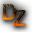
<style>
.page{position:relative;width:32px;height:32px}
.page>*{position:absolute;margin:0}
.t1{font:20px "Track"}
</style>
<div class="page">
<p class="t1" style="left:3px;top:4px;width:13px;height:16px">d</p>
<p class="t1" style="left:13px;top:10px;width:13px;height:16px">z</p>
</div>
